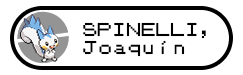
<style>
.page{position:relative;width:243px;height:75px;background:#ffffff}
.page>*{position:absolute;margin:0}
.t1{font:14.7px "PokemonGB";color:#000000}
</style>
<div class="page">
<p class="t1" style="left:83px;top:22px;width:123px;height:35px">SPINELLI,<br>Joaquín</p>
</div>
